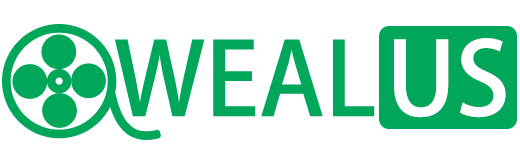
<style>
.page{position:relative;width:520px;height:156px;background:#ffffff}
.page>*{position:absolute;margin:0}
.t1{font:100px "AdobeHeitiStd-Regular";color:#00a65a}
.t2{font:100px "AdobeHeitiStd-Regular";color:#ffffff}
</style>
<div class="page">
<p class="t1" style="left:115px;top:39px;width:260px;height:78px">WEAL</p>
<p class="t2" style="left:394px;top:38px;width:112px;height:80px">US</p>
</div>
